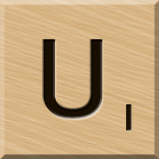
<style>
.page{position:relative;width:159px;height:159px}
.page>*{position:absolute;margin:0}
.t1{font:116px "MS-UIGothic";color:#180e01}
.t2{font:36px "GillSansMT";color:#1c1101;font-weight:bold;scale:1.1 1}
</style>
<div class="page">
<p class="t1" style="left:43px;top:40px;width:60px;height:79px">U</p>
<p class="t2" style="left:126px;top:104px;width:6px;height:27px">1</p>
</div>
